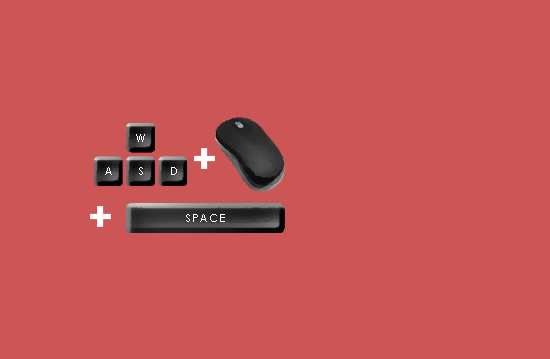
<style>
.page{position:relative;width:550px;height:359px;background:#cc5555}
.page>*{position:absolute;margin:0}
.t1{font:10.5px "CenturyGothic";letter-spacing:-0.05em;color:#ffffff}
</style>
<div class="page">
<p class="t1" style="left:136px;top:134px;width:9px;height:8px">W</p>
<p class="t1" style="left:105px;top:167px;width:7px;height:8px">A</p>
<p class="t1" style="left:139px;top:167px;width:4px;height:8px">S</p>
<p class="t1" style="left:171px;top:167px;width:6px;height:8px">D</p>
<p class="t1" style="left:186px;top:214px;width:39px;height:8px">S P A C E</p>
</div>
